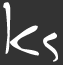
<style>
.page{position:relative;width:63px;height:65px;background:#333333}
.page>*{position:absolute;margin:0}
.t1{font:72px "Inkburrow";color:#ffffff}
</style>
<div class="page">
<p class="t1" style="left:3px;top:2px;width:55px;height:60px">ks</p>
</div>
